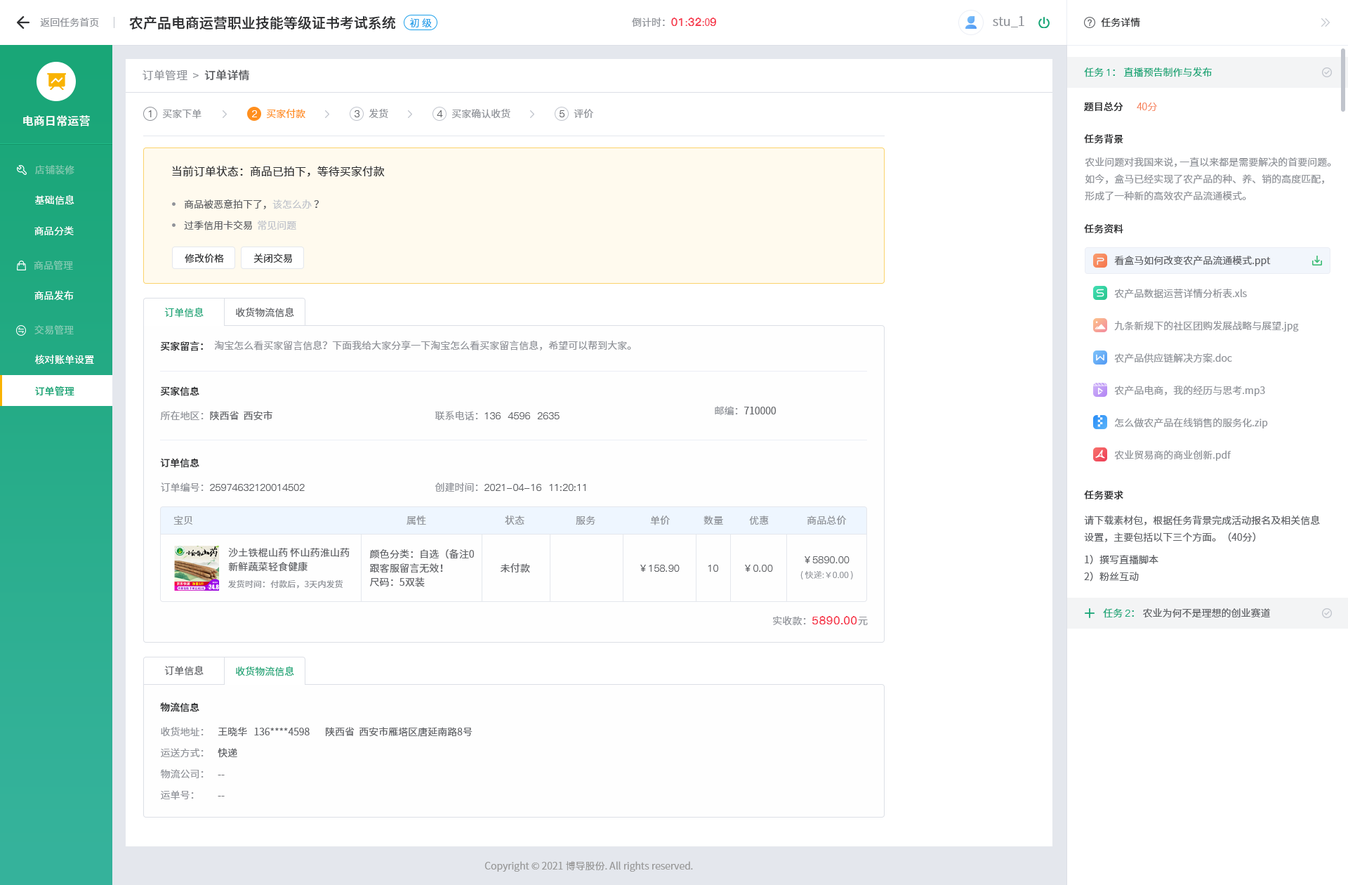
<style>
.page{position:relative;width:1348px;height:885px;background:#ffffff}
.page>*{position:absolute;margin:0}
.t1{font:9.8px "SourceHanSansCN-Normal";color:#909399}
.t2{font:14px "SourceHanSansCN-Medium";color:#303133}
.t3{font:11.2px "PingFang-SC-Heavy";color:#f63f52}
.t4{font:9.8px "SourceHanSansCN-Normal";color:#f63f52}
.t5{font:12.6px "SourceHanSansCN-Normal";color:#909399}
.t6{font:9.8px "SourceHanSansCN-Normal";color:#303133}
.t7{font:9.8px "SourceHanSansCN-Normal";color:#1da0ea}
.t8{font:11.2px "SourceHanSansCN-Normal";letter-spacing:0.01em;color:#909399}
.t9{font:11.2px "SourceHanSansCN-Medium";letter-spacing:0.01em;color:#606266}
.t10{font:9.8px "SourceHanSansCN-Normal";color:#19a677}
.t11{font:9.8px "PingFang-SC-Medium";color:#19a677}
.t12{font:9.8px "SourceHanSansCN-Medium";color:#303133}
.t13{font:9.8px "PingFang-SC-Medium";color:#606266}
.t14{font:9.8px "PingFang-SC-Medium";color:#ffffff}
.t15{font:9.8px "SourceHanSansCN-Normal";color:#ff8f1e}
.t16{font:9.8px "SourceHanSansCN-Light";color:#f67d53}
.t17{font:11.2px "SourceHanSansCN-Medium";letter-spacing:0.01em;color:#ffffff}
.t18{font:9.8px/16.8px "SourceHanSansCN-Normal";color:#909399}
.t19{font:9.8px "SourceHanSansCN-Regular";letter-spacing:0.01em;color:#81c8af}
.t20{font:11.2px "SourceHanSansCN-Normal";color:#303133}
.t21{font:9.8px "SourceHanSansCN-Normal";letter-spacing:0.01em;color:#ffffff}
.t22{font:9.8px/21.1px "SourceHanSansCN-Normal";color:#606266}
.t23{font:9.8px/21.1px "SourceHanSansCN-Normal";color:#c0c4cc}
.t24{font:9.8px "SourceHanSansCN-Normal";color:#606266}
.t25{font:9.8px "SourceHanSansCN-Regular";letter-spacing:0.01em;color:#81cab2}
.t26{font:9.8px "SourceHanSansCN-Regular";letter-spacing:0.01em;color:#ffffff}
.t27{font:9.8px "SourceHanSansSC-Normal";color:#1aa678}
.t28{font:9.8px "SourceHanSansSC-Normal";color:#606266}
.t29{font:9.8px "SourceHanSansCN-Regular";letter-spacing:0.01em;color:#82cab3}
.t30{font:9.8px "SourceHanSansSC-Medium";color:#303133}
.t31{font:9.8px "SourceHanSansSC-Normal";color:#909399}
.t32{font:9.8px "SourceHanSansCN-Medium";letter-spacing:0.01em;color:#19a677}
.t33{font:9.8px "SourceHanSansCN-Normal";letter-spacing:0.01em;color:#909399}
.t34{font:9.8px/16.8px "SourceHanSansCN-Normal";color:#606266}
.t35{font:9.8px/14px "SourceHanSansCN-Normal";letter-spacing:0.01em;color:#606266}
.t36{font:9.8px "PingFang-SC-Medium";letter-spacing:0.01em;color:#606266}
.t37{font:9.8px "SourceHanSansCN-Normal";letter-spacing:0.01em;color:#606266}
.t38{font:8.4px "SourceHanSansCN-Normal";letter-spacing:0.01em;color:#909399}
.t39{font:8.4px "SourceHanSansCN-Light";letter-spacing:0.01em;color:#909399}
.t40{font:11.2px "PingFang-SC-Bold";letter-spacing:0.01em;color:#f63f52}
.t41{font:9.8px "PingFang-SC-Medium";color:#1aa678}
.t42{font:9.8px "SourceHanSansCN-Normal";color:#1aa678}
.t43{font:9.8px "SourceHanSansSC-Normal";color:#19a677}
.t44{font:9.8px/21.1px "SourceHanSansSC-Normal";color:#606266}
.t45{font:9.8px/21.1px "SourceHanSansSC-Normal";color:#909399}
.t46{font:9.8px "SourceHanSansCN-Normal";color:#999999}
</style>
<div class="page">
<p class="t1" style="left:40px;top:18px;width:59px;height:9px">返回任务首页</p>
<p class="t2" style="left:129px;top:15px;width:267px;height:14px">农产品电商运营职业技能等级证书考试系统</p>
<p class="t1" style="left:632px;top:18px;width:84px;height:9px">倒计时：<span class="t3">01</span><span class="t4">:</span><span class="t3">32</span><span class="t4">:0</span><span class="t3">9</span></p>
<p class="t5" style="left:993px;top:16px;width:31px;height:11px">stu_1</p>
<p class="t6" style="left:1101px;top:18px;width:39px;height:9px">任务详情</p>
<p class="t7" style="left:409px;top:18px;width:23px;height:10px">初 级</p>
<p class="t8" style="left:143px;top:70px;width:106px;height:11px">订单管理  &gt;<span class="t9">  订单详情</span></p>
<p class="t10" style="left:1084px;top:67px;width:128px;height:10px">任务 <span class="t11">1</span>： 直播预告制作与发布</p>
<p class="t12" style="left:1084px;top:102px;width:39px;height:10px">题目总分</p>
<p class="t13" style="left:148px;top:110px;width:4px;height:7px">1</p>
<p class="t1" style="left:162px;top:109px;width:39px;height:10px">买家下单</p>
<p class="t14" style="left:252px;top:110px;width:5px;height:7px">2</p>
<p class="t15" style="left:266px;top:109px;width:39px;height:10px">买家付款</p>
<p class="t13" style="left:355px;top:110px;width:4px;height:7px">3</p>
<p class="t1" style="left:369px;top:108px;width:19px;height:10px">发货</p>
<p class="t13" style="left:437px;top:110px;width:6px;height:7px">4</p>
<p class="t1" style="left:451px;top:109px;width:59px;height:10px">买家确认收货</p>
<p class="t13" style="left:560px;top:110px;width:4px;height:7px">5</p>
<p class="t1" style="left:574px;top:109px;width:19px;height:9px">评价</p>
<p class="t16" style="left:1137px;top:103px;width:20px;height:8px">40分</p>
<p class="t17" style="left:23px;top:115px;width:67px;height:11px">电商日常运营</p>
<p class="t12" style="left:1084px;top:133px;width:39px;height:11px">任务背景</p>
<p class="t18" style="left:1085px;top:157px;width:246px;height:44px">农业问题对我国来说，一直以来都是需要解决的首要问题。如今，盒马已经实现了农产品的种、养、销的高度匹配，形成了一种新的高效农产品流通模式。</p>
<p class="t19" style="left:35px;top:165px;width:39px;height:10px">店铺装修</p>
<p class="t20" style="left:172px;top:166px;width:213px;height:11px">当前订单状态：商品已拍下，等待买家付款</p>
<p class="t21" style="left:35px;top:194px;width:39px;height:11px">基础信息</p>
<p class="t22" style="left:184px;top:199px;width:135px;height:31px">商品被恶意拍下了，<span class="t23">该怎么办 </span>？<br>过季信用卡交易  <span class="t23">常见问题</span></p>
<p class="t21" style="left:34px;top:226px;width:40px;height:9px">商品分类</p>
<p class="t12" style="left:1084px;top:223px;width:39px;height:11px">任务资料</p>
<p class="t6" style="left:185px;top:253px;width:39px;height:10px">修改价格</p>
<p class="t6" style="left:253px;top:253px;width:39px;height:10px">关闭交易</p>
<p class="t24" style="left:1114px;top:256px;width:157px;height:10px">看盒马如何改变农产品流通模式.ppt</p>
<p class="t25" style="left:34px;top:260px;width:39px;height:10px">商品管理</p>
<p class="t26" style="left:34px;top:290px;width:40px;height:10px">商品发布</p>
<p class="t1" style="left:1114px;top:289px;width:133px;height:9px">农产品数据运营详情分析表.xls</p>
<p class="t27" style="left:164px;top:307px;width:40px;height:10px">订单信息</p>
<p class="t28" style="left:236px;top:307px;width:58px;height:10px">收货物流信息</p>
<p class="t29" style="left:34px;top:325px;width:40px;height:10px">交易管理</p>
<p class="t1" style="left:1114px;top:320px;width:185px;height:11px">九条新规下的社区团购发展战略与展望.jpg</p>
<p class="t30" style="left:160px;top:341px;width:43px;height:10px">买家留言：</p>
<p class="t31" style="left:214px;top:340px;width:417px;height:10px">淘宝怎么看买家留言信息？下面我给大家分享一下淘宝怎么看买家留言信息，希望可以帮到大家。</p>
<p class="t1" style="left:1114px;top:353px;width:118px;height:10px">农产品供应链解决方案.doc</p>
<p class="t21" style="left:35px;top:355px;width:59px;height:9px">核对账单设置</p>
<p class="t32" style="left:35px;top:385px;width:39px;height:11px">订单管理</p>
<p class="t30" style="left:160px;top:386px;width:39px;height:10px">买家信息</p>
<p class="t1" style="left:1114px;top:385px;width:151px;height:11px">农产品电商，我的经历与思考.mp3</p>
<p class="t28" style="left:160px;top:410px;width:112px;height:11px"><span class="t31">所在地区：</span>陕西省  西安市</p>
<p class="t13" style="left:435px;top:411px;width:125px;height:10px"><span class="t31">联系电话：</span>136  4596  2635</p>
<p class="t28" style="left:715px;top:406px;width:61px;height:9px"><span class="t31">邮编：</span>710000</p>
<p class="t1" style="left:1115px;top:418px;width:153px;height:10px">怎么做农产品在线销售的服务化.zip</p>
<p class="t30" style="left:160px;top:458px;width:39px;height:10px">订单信息</p>
<p class="t1" style="left:1114px;top:450px;width:117px;height:11px">农业贸易商的商业创新.pdf</p>
<p class="t13" style="left:161px;top:482px;width:144px;height:10px"><span class="t31">订单编号：</span>25974632120014502</p>
<p class="t13" style="left:435px;top:482px;width:151px;height:9px"><span class="t31">创建时间：</span>2021-04-16  11:20:11</p>
<p class="t12" style="left:1084px;top:490px;width:39px;height:10px">任务要求</p>
<p class="t33" style="left:173px;top:515px;width:20px;height:9px">宝贝</p>
<p class="t33" style="left:406px;top:515px;width:20px;height:10px">属性</p>
<p class="t33" style="left:505px;top:515px;width:19px;height:9px">状态</p>
<p class="t33" style="left:576px;top:515px;width:19px;height:9px">服务</p>
<p class="t33" style="left:650px;top:515px;width:20px;height:10px">单价</p>
<p class="t33" style="left:703px;top:515px;width:20px;height:9px">数量</p>
<p class="t33" style="left:749px;top:515px;width:20px;height:10px">优惠</p>
<p class="t33" style="left:807px;top:515px;width:40px;height:9px">商品总价</p>
<p class="t34" style="left:1084px;top:515px;width:236px;height:66px">请下载素材包，根据任务背景完成活动报名及相关信息设置，主要包括以下三个方面。（40分）<br>1）撰写直播脚本<br>2）粉丝互动</p>
<p class="t35" style="left:228px;top:548px;width:122px;height:23px">沙土铁棍山药 怀山药淮山药新鲜蔬菜轻食健康</p>
<p class="t35" style="left:369px;top:549px;width:105px;height:38px">颜色分类：自选（备注0<br>跟客服留言无效！<br>尺码：5双装</p>
<p class="t36" style="left:805px;top:556px;width:45px;height:7px">￥5890.00</p>
<p class="t37" style="left:500px;top:563px;width:30px;height:9px">未付款</p>
<p class="t36" style="left:640px;top:564px;width:40px;height:7px">￥158.90</p>
<p class="t36" style="left:708px;top:564px;width:10px;height:7px">10</p>
<p class="t36" style="left:745px;top:564px;width:28px;height:7px">￥0.00</p>
<p class="t38" style="left:227px;top:579px;width:116px;height:9px">发货时间：付款后，3天内发货</p>
<p class="t39" style="left:800px;top:571px;width:53px;height:8px">( 快递:￥0.00 )</p>
<p class="t40" style="left:773px;top:616px;width:95px;height:9px"><span class="t33">实收款：</span>5890.00<span class="t33">元</span></p>
<p class="t24" style="left:1103px;top:608px;width:167px;height:10px"><span class="t10">任务 </span><span class="t41">2</span><span class="t42">：</span> 农业为何不是理想的创业赛道</p>
<p class="t28" style="left:164px;top:665px;width:40px;height:10px">订单信息</p>
<p class="t43" style="left:236px;top:666px;width:58px;height:10px">收货物流信息</p>
<p class="t30" style="left:160px;top:702px;width:39px;height:10px">物流信息</p>
<p class="t44" style="left:218px;top:726px;width:254px;height:70px">王晓华   136****4598       陕西省  西安市雁塔区唐延南路8号<br>快递<br>--<br>--</p>
<p class="t45" style="left:160px;top:727px;width:44px;height:73px">收货地址：<br>运送方式：<br>物流公司：<br>运单号：</p>
<p class="t46" style="left:484px;top:861px;width:209px;height:10px">Copyright © 2021 博导股份. All rights reserved.</p>
</div>
